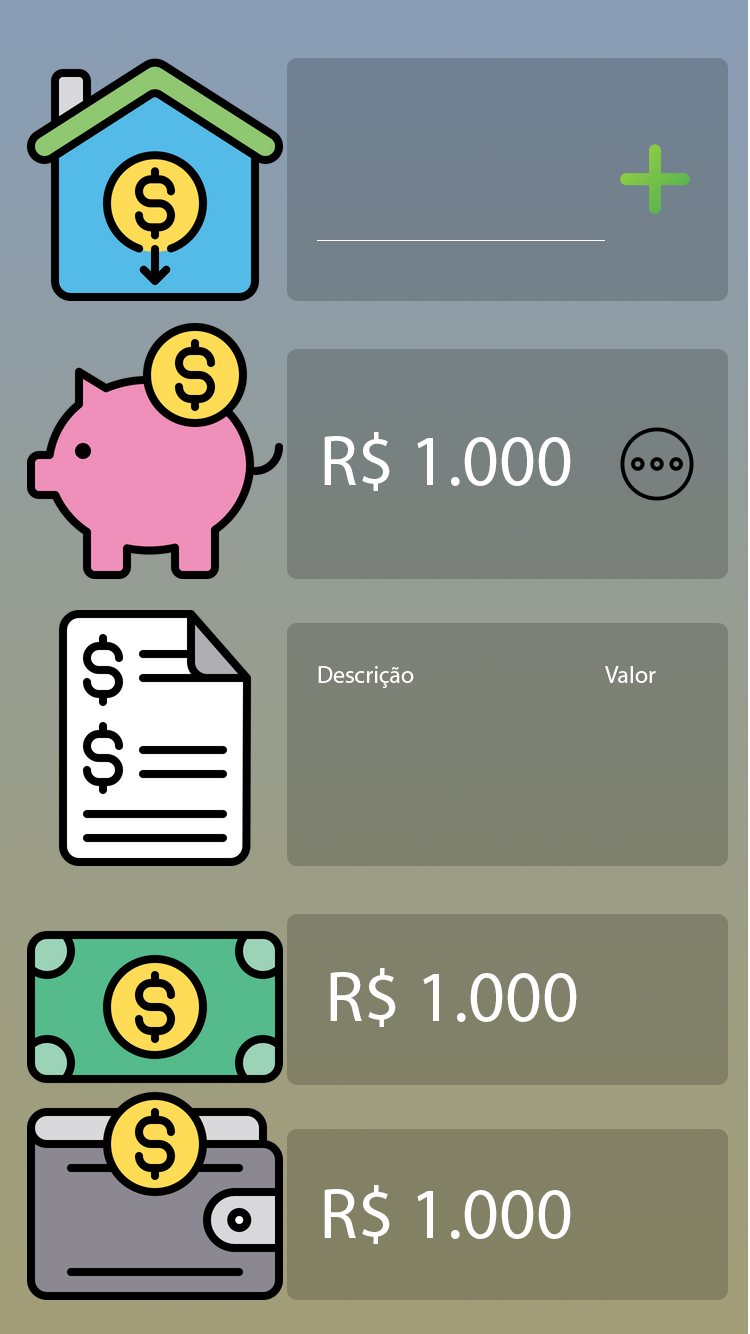
<style>
.page{position:relative;width:750px;height:1334px}
.page>*{position:absolute;margin:0}
.t1{font:72px "MyriadPro-Regular";color:#ffffff}
.t2{font:24px "MyriadPro-Regular";color:#ffffff}
</style>
<div class="page">
<p class="t1" style="left:324px;top:432px;width:247px;height:59px">R$ 1.000</p>
<p class="t2" style="left:318px;top:666px;width:96px;height:22px">Descrição</p>
<p class="t2" style="left:605px;top:666px;width:51px;height:17px">Valor</p>
<p class="t1" style="left:330px;top:968px;width:247px;height:59px">R$ 1.000</p>
<p class="t1" style="left:324px;top:1185px;width:247px;height:59px">R$ 1.000</p>
</div>
